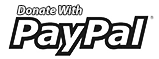
<style>
.page{position:relative;width:159px;height:59px;background:#ffffff}
.page>*{position:absolute;margin:0}
.t1{font:11.9px "MyriadPro-BoldIt";color:#ffffff}
</style>
<div class="page">
<p class="t1" style="left:17px;top:5px;width:65px;height:10px">Donate With</p>
</div>
